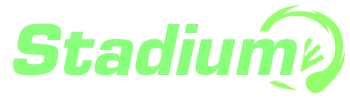
<style>
.page{position:relative;width:350px;height:100px;background:#ffffff}
.page>*{position:absolute;margin:0}
.t1{font:68px "Eurostile-BoldOblique";color:#89ff7b}
</style>
<div class="page">
<p class="t1" style="left:13px;top:23px;width:284px;height:53px">Stadium</p>
</div>
